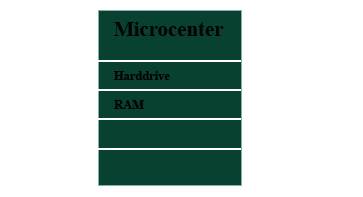
<style>
.page{position:relative;width:363px;height:197px;background:#ffffff}
.page>*{position:absolute;margin:0}
.t1{font:20.8px "TimesNewRomanPS-BoldMT";color:#020202}
.t2{font:12.5px "TimesNewRomanPS-BoldMT";color:#010101}
.t3{font:12.5px "TimesNewRomanPS-BoldMT";color:#020202}
</style>
<div class="page">
<p class="t1" style="left:114px;top:22px;width:110px;height:14px">Microcenter</p>
<p class="t2" style="left:113px;top:71px;width:57px;height:9px">Harddrive</p>
<p class="t3" style="left:114px;top:100px;width:31px;height:9px">RAM</p>
</div>
